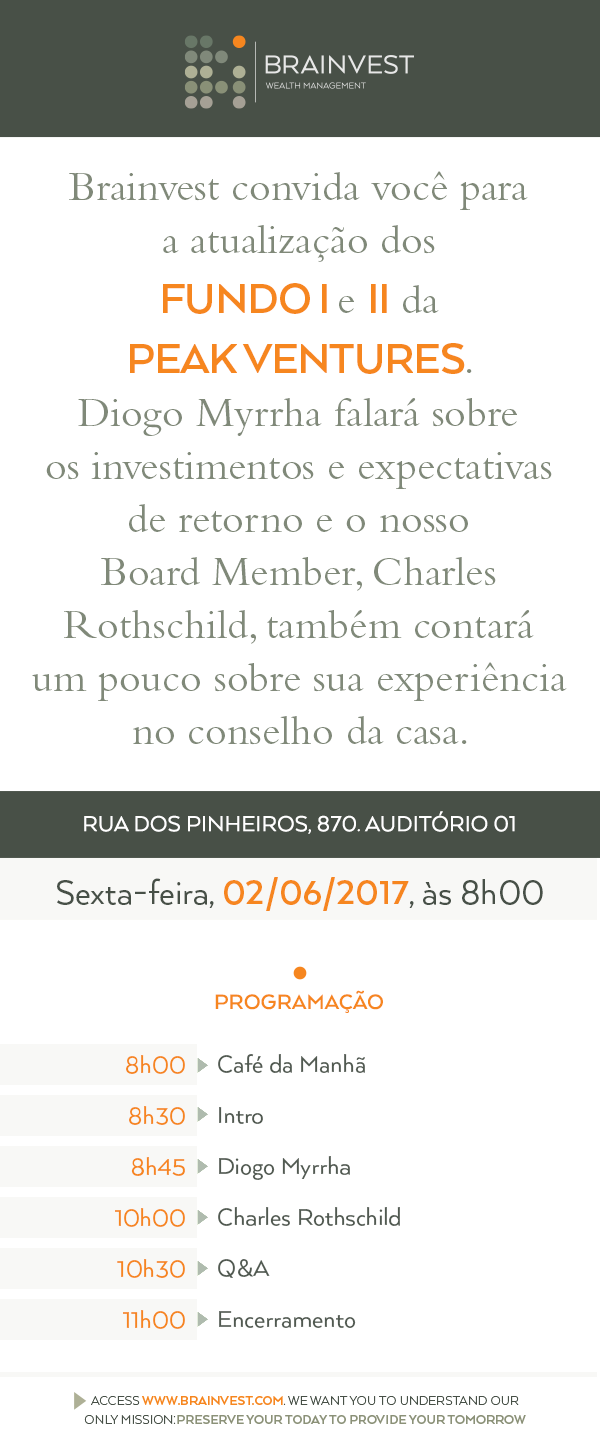
<style>
.page{position:relative;width:600px;height:1449px;background:#ffffff}
.page>*{position:absolute;margin:0}
.t1{font:42px/53px "BemboStd";color:#808979}
.t2{font:48px/60px "ArquitectaBold";letter-spacing:-0.025em;color:#f6861f;text-transform:uppercase}
.t3{font:25px "Arquitecta";color:#ffffff;text-transform:uppercase}
.t4{font:38px "Arquitecta";color:#475047}
.t5{font:38px "ArquitectaBold";color:#f6861f}
.t6{font:24px "ArquitectaBold";color:#f6861f;text-transform:uppercase}
.t7{font:27px/51px "Arquitecta";color:#f6861f}
.t8{font:27px/51px "Arquitecta";color:#515a51}
</style>
<div class="page">
<p class="t1" style="left:32px;top:171px;width:535px;height:574px;text-align:center">Brainvest convida você para <br>a atualização dos <br><span class="t2">Fundo I </span>e <span class="t2">II</span> da <br><span class="t2">peak ventures</span>. <br>Diogo Myrrha falará sobre <br>os investimentos e expectativas <br>de retorno e o nosso <br>Board Member, Charles Rothschild, também contará <br>um pouco sobre sua experiência no conselho da casa.</p>
<p class="t3" style="left:84px;top:811px;width:431px;height:23px">Rua dos Pinheiros, 870. Auditório 01</p>
<p class="t4" style="left:57px;top:877px;width:486px;height:34px">Sexta-feira, <span class="t5">02/06/2017</span>, às 8h00</p>
<p class="t6" style="left:215px;top:990px;width:168px;height:23px">Programação</p>
<p class="t7" style="left:115px;top:1055px;width:70px;height:274px;text-align:right">8h00<br>8h30<br>8h45<br>10h00<br>10h30<br>11h00</p>
<p class="t8" style="left:218px;top:1054px;width:182px;height:274px">Café da Manhã<br>Intro<br>Diogo Myrrha<br>Charles Rothschild<br>Q&amp;A<br>Encerramento</p>
</div>
